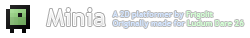
<style>
.page{position:relative;width:250px;height:38px;background:#ffffff}
.page>*{position:absolute;margin:0}
.t1{font:8px "TrebuchetMS-Bold";color:#c8deff}
.t2{font:8px "TrebuchetMS-Bold";color:#c8ffc9}
</style>
<div class="page">
<p class="t1" style="left:112px;top:11px;width:132px;height:17px;opacity:0.8">A 2D platformer by <span class="t2">Frigolit<br></span>Originally made for <span class="t2">Ludum Dare 26</span></p>
</div>
